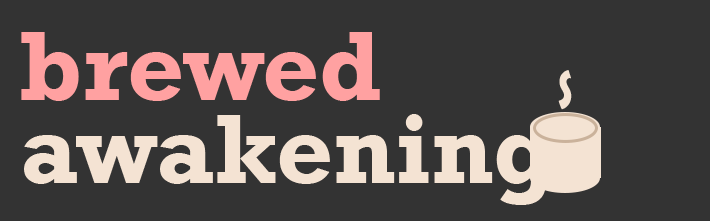
<style>
.page{position:relative;width:710px;height:221px;background:#333333}
.page>*{position:absolute;margin:0}
.t1{font:100px/83.3px "Rockwell-Bold";color:#f4e3d3}
.t2{font:100px/83.3px "Rockwell-Bold";color:#ffa1a1}
.t3{font:54.1px "BerlinSansFBDemi-Bold";color:#f4e3d3;scale:0.64 1}
</style>
<div class="page">
<p class="t1" style="left:21px;top:32px;width:533px;height:173px"><span class="t2">brewed<br></span>awakening</p>
<p class="t3" style="left:558px;top:70px;width:14px;height:40px">S</p>
</div>
